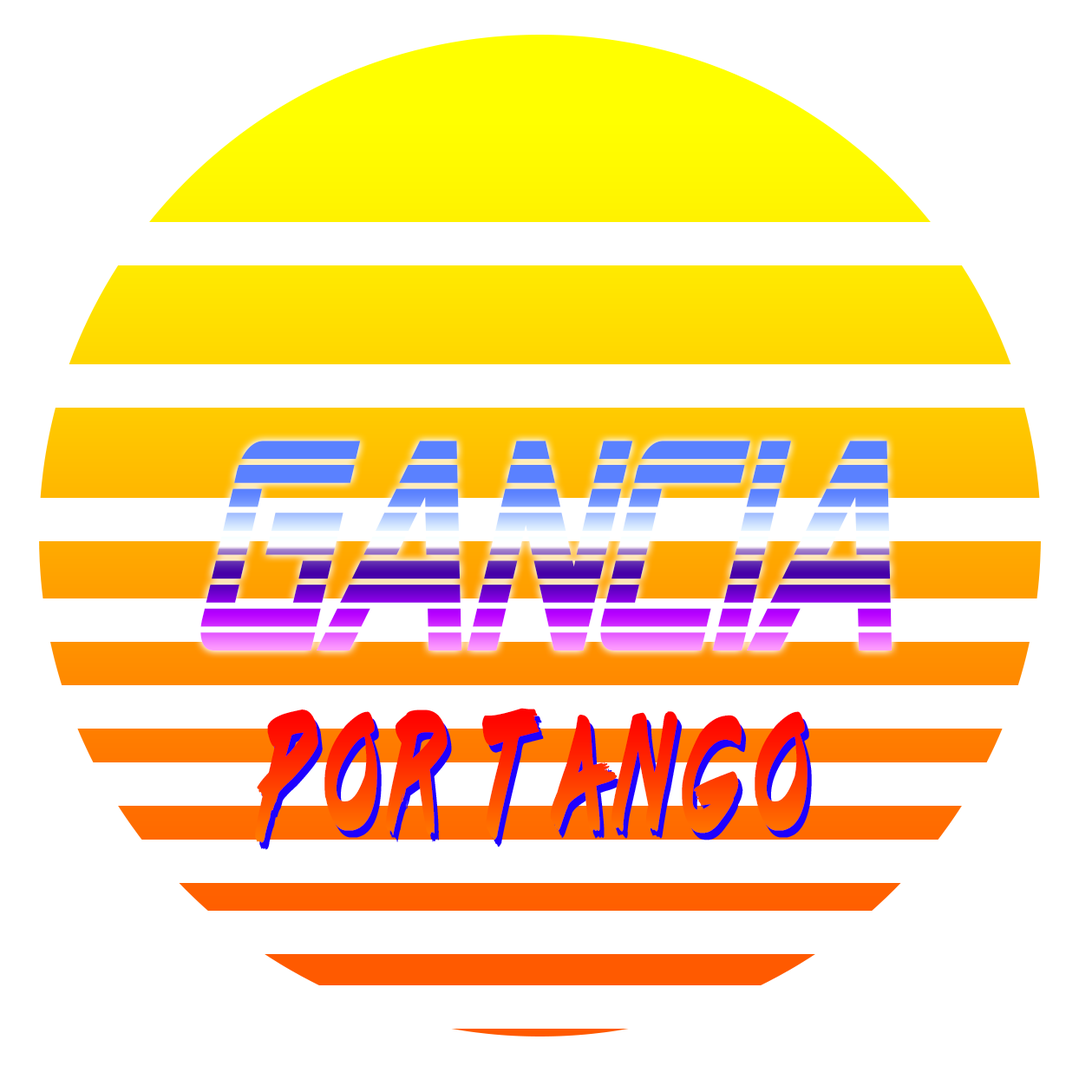
<style>
.page{position:relative;width:1092px;height:1092px;background:#ffffff}
.page>*{position:absolute;margin:0}
.t1{font:299.4px "AlienEncountersItalic";scale:0.65 1}
.t2{font:143.9px "lazer84";letter-spacing:0.26em;scale:0.47 1}
</style>
<div class="page">
<p class="t1" style="left:200px;top:441px;width:692px;height:210px">gancia</p>
<p class="t2" style="left:255px;top:708px;width:552px;height:135px">por tango</p>
</div>
